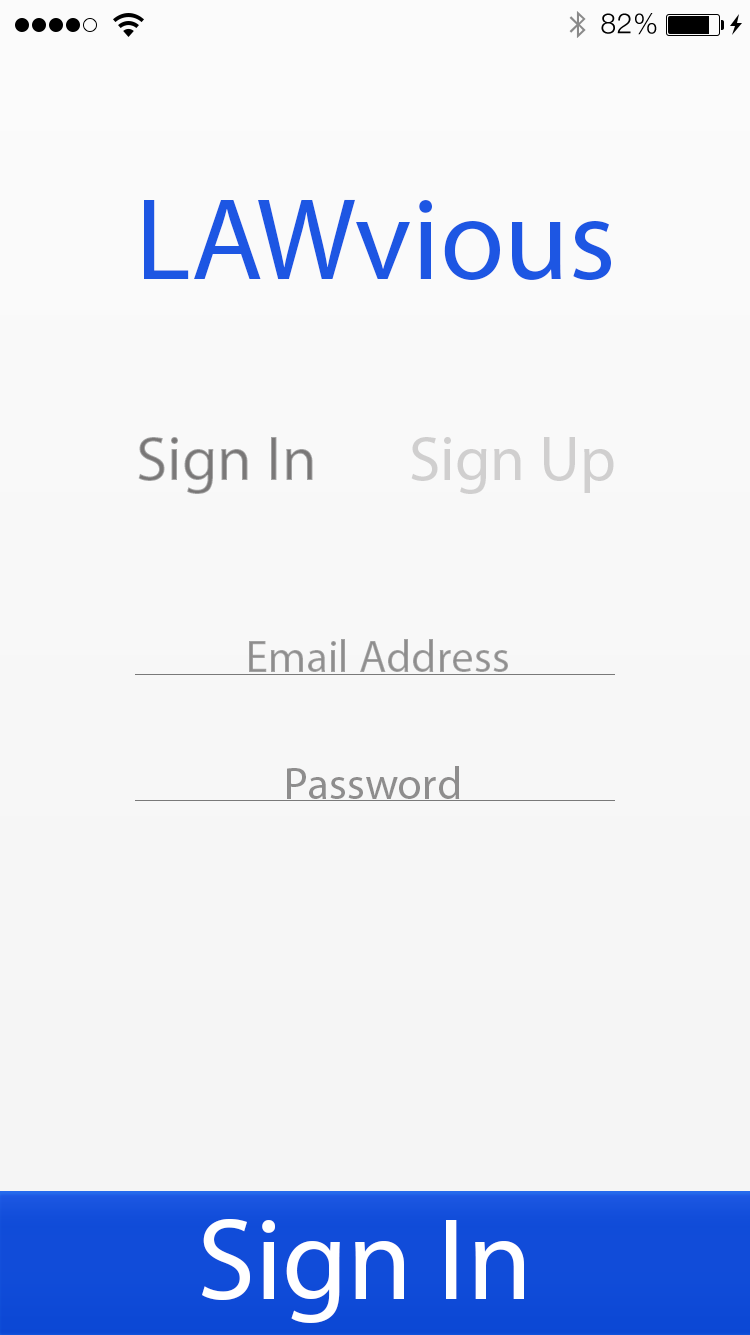
<style>
.page{position:relative;width:750px;height:1335px}
.page>*{position:absolute;margin:0}
.t1{font:28px "HelveticaNeue-Light";letter-spacing:0.025em;color:#000000}
.t2{font:117.7px "MyriadPro-Regular";color:#1d56e3}
.t3{font:63.4px "MyriadPro-Regular";color:#797777}
.t4{font:63.4px "MyriadPro-Regular";color:#d0cfcf}
.t5{font:45.3px "MyriadPro-Regular";color:#8e8d8d}
.t6{font:117.7px "MyriadPro-Regular";color:#ffffff}
</style>
<div class="page">
<p class="t1" style="left:601px;top:13px;width:56px;height:22px">82%</p>
<p class="t2" style="left:144px;top:199px;width:467px;height:82px">LAWvious</p>
<p class="t3" style="left:138px;top:437px;width:175px;height:57px">Sign In</p>
<p class="t4" style="left:411px;top:437px;width:203px;height:57px">Sign Up</p>
<p class="t5" style="left:249px;top:639px;width:259px;height:33px">Email Address</p>
<p class="t5" style="left:287px;top:766px;width:173px;height:33px">Password</p>
<p class="t6" style="left:202px;top:1219px;width:322px;height:104px">Sign In</p>
</div>
